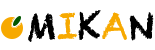
<style>
.page{position:relative;width:155px;height:50px;background:#ffffff}
.page>*{position:absolute;margin:0}
.t1{font:36px "Chalkduster";color:#000000}
.t2{font:36px "Chalkduster";color:#f7a900}
</style>
<div class="page">
<p class="t1" style="left:28px;top:10px;width:126px;height:32px">M<span class="t2">I</span>K<span class="t2">A</span>N</p>
</div>
